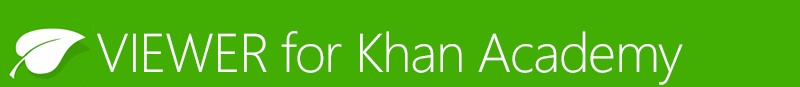
<style>
.page{position:relative;width:800px;height:87px;background:#42ad02}
.page>*{position:absolute;margin:0}
.t1{font:54.8px "SegoeUI-Light";letter-spacing:-0.025em;color:#ffffff}
</style>
<div class="page">
<p class="t1" style="left:97px;top:31px;width:586px;height:54px">VIEWER for Khan Academy</p>
</div>
